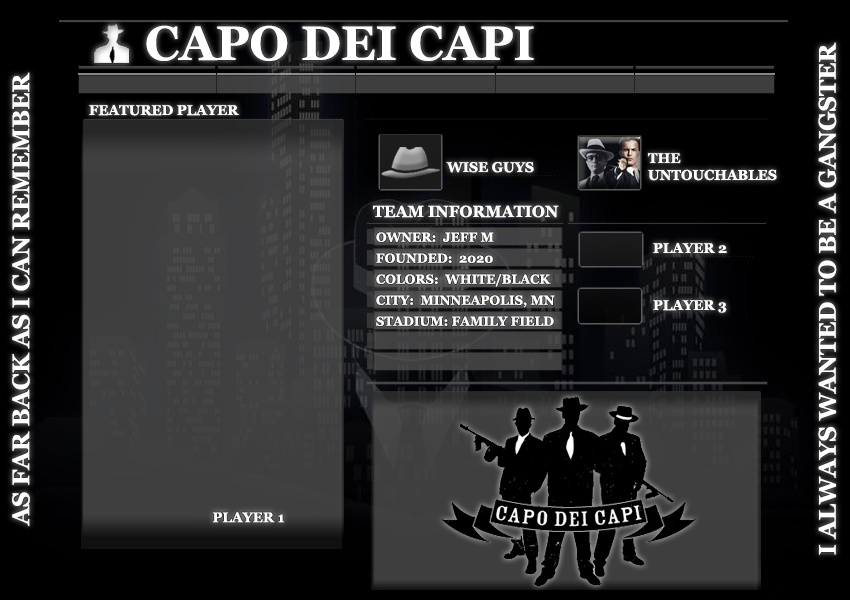
<style>
.page{position:relative;width:850px;height:600px;background:#000000}
.page>*{position:absolute;margin:0}
.t1{font:48px "Georgia-Bold";color:#ffffff}
.t2{font:24px "Georgia-Bold";color:#ffffff}
.t3{font:14px "Georgia-Bold";color:#ffffff}
.t4{font:16px "Georgia-Bold";color:#ffffff}
.t5{font:13px "Georgia-Bold";color:#ffffff}
</style>
<div class="page">
<p class="t1" style="left:146px;top:25px;width:388px;height:36px">CAPO DEI CAPI</p>
<p class="t2" style="left:12px;top:42px;width:825px;height:513px;text-align:center;rotate:-90deg">AS FAR BACK AS I CAN REMEMBER<br><br><br><br><br><br><br><br><br><br><br><br><br><br><br><br><br><br><br><br><br><br><br><br><br><br><br><br>I ALWAYS WANTED TO BE A GANGSTER</p>
<p class="t3" style="left:89px;top:105px;width:150px;height:11px">FEATURED PLAYER</p>
<p class="t3" style="left:648px;top:153px;width:129px;height:28px">THE<br>UNTOUCHABLES</p>
<p class="t3" style="left:446px;top:162px;width:88px;height:11px">WISE GUYS</p>
<p class="t4" style="left:373px;top:205px;width:186px;height:13px">TEAM INFORMATION</p>
<p class="t5" style="left:376px;top:232px;width:118px;height:10px">OWNER:  JEFF M</p>
<p class="t3" style="left:653px;top:243px;width:74px;height:10px">PLAYER 2</p>
<p class="t5" style="left:376px;top:253px;width:117px;height:10px">FOUNDED:  2020</p>
<p class="t5" style="left:376px;top:274px;width:175px;height:13px">COLORS:  WHITE/BLACK</p>
<p class="t5" style="left:376px;top:295px;width:179px;height:13px">CITY:  MINNEAPOLIS, MN</p>
<p class="t3" style="left:653px;top:300px;width:74px;height:13px">PLAYER 3</p>
<p class="t5" style="left:376px;top:316px;width:178px;height:10px">STADIUM: FAMILY FIELD</p>
<p class="t3" style="left:212px;top:512px;width:73px;height:11px">PLAYER 1</p>
</div>
